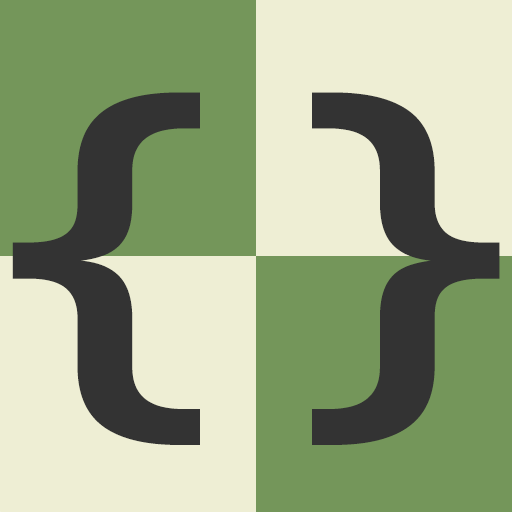
<style>
.page{position:relative;width:512px;height:512px;background:#74965a}
.page>*{position:absolute;margin:0}
.t1{font:389.1px "Consolas-Bold";letter-spacing:0.01em;color:#333333;scale:1.3 1}
</style>
<div class="page">
<p class="t1" style="left:12px;top:92px;width:488px;height:353px">{}</p>
</div>
